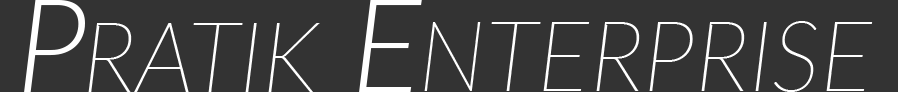
<style>
.page{position:relative;width:898px;height:92px;background:#333333}
.page>*{position:absolute;margin:0}
.t1{font:130.7px "Lato-LightItalic";color:#ffffff}
.t2{font:97.3px "Lato-ThinItalic";color:#ffffff}
</style>
<div class="page">
<p class="t1" style="left:24px;top:0px;width:61px;height:92px">P</p>
<p class="t1" style="left:359px;top:0px;width:63px;height:92px">E</p>
<p class="t2" style="left:88px;top:23px;width:232px;height:69px">RATIK</p>
<p class="t2" style="left:424px;top:21px;width:449px;height:71px">NTERPRISE</p>
</div>
